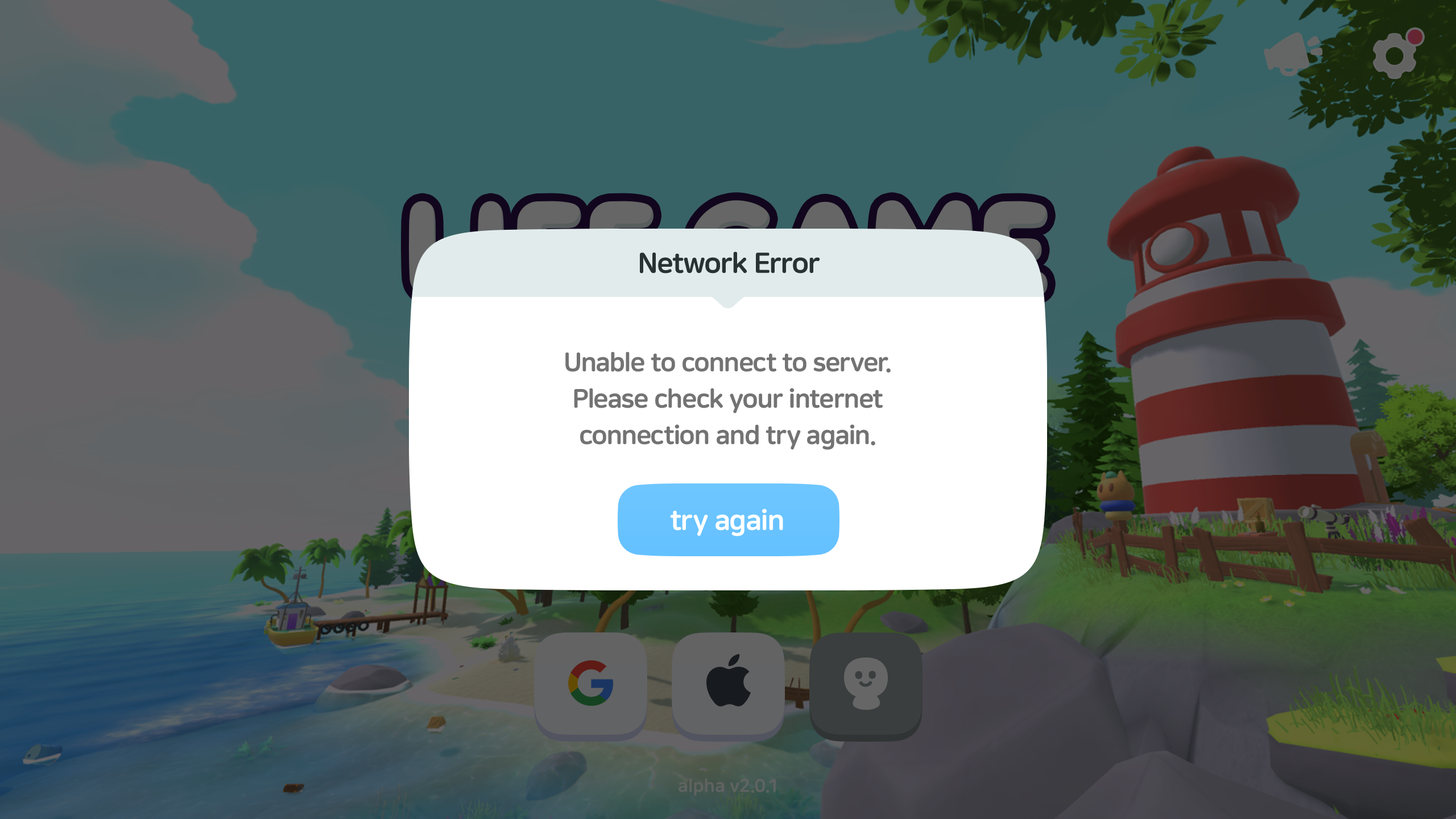
<style>
.page{position:relative;width:1456px;height:819px}
.page>*{position:absolute;margin:0}
.t1{font:28.4px "NanumSquareRoundEB";letter-spacing:-0.025em;color:#283233}
.t2{font:26.2px/36.4px "NanumSquareRoundEB";letter-spacing:-0.025em;color:#737373}
.t3{font:28.4px "NanumSquareRoundEB";letter-spacing:-0.025em;color:#ffffff}
</style>
<div class="page">
<p class="t1" style="left:640px;top:251px;width:180px;height:23px">Network Error</p>
<p class="t2" style="left:565px;top:351px;width:326px;height:99px;text-align:center">Unable to connect to server.<br>Please check your internet<br>connection and try again.</p>
<p class="t3" style="left:670px;top:508px;width:113px;height:28px">try again</p>
</div>
